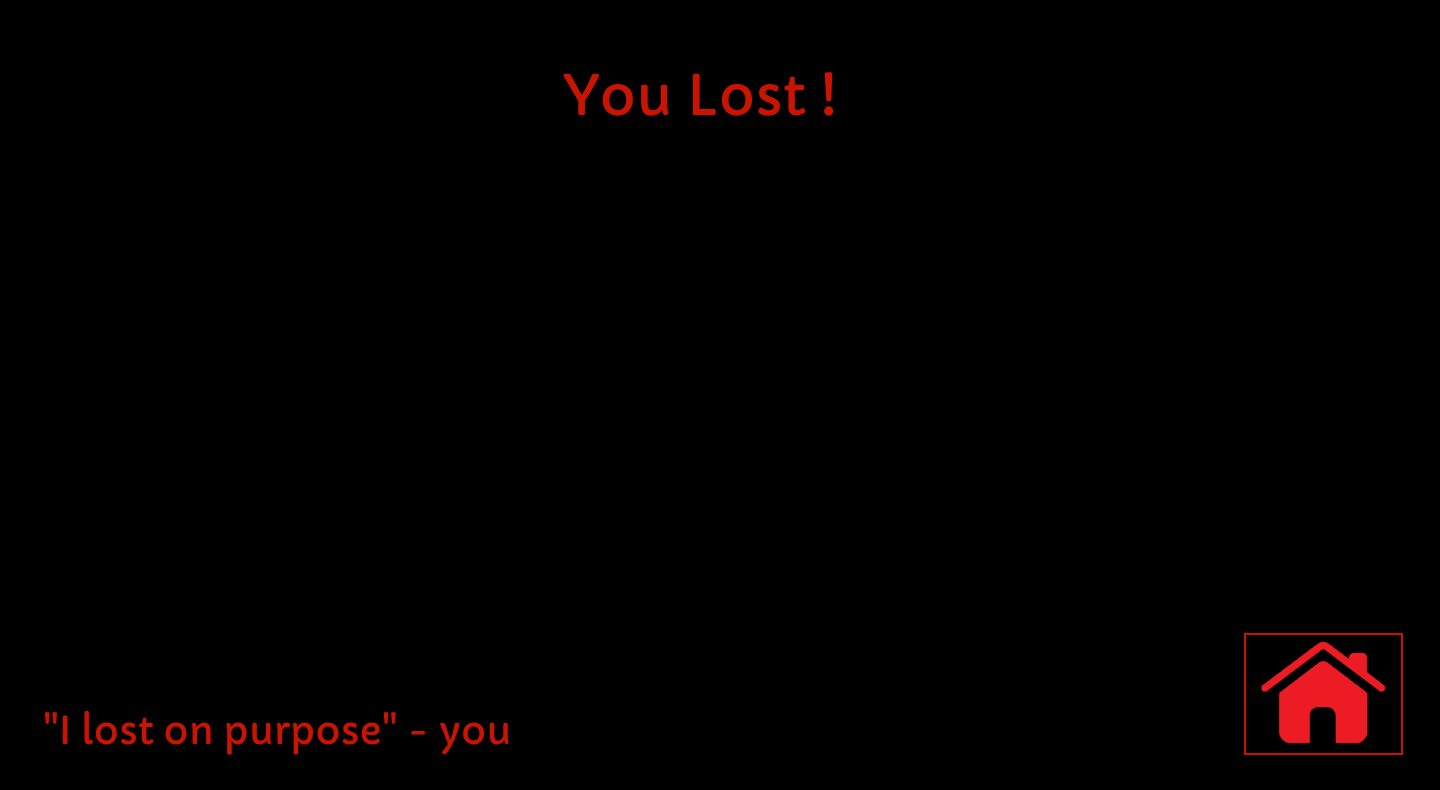
<style>
.page{position:relative;width:1440px;height:790px;background:#000000}
.page>*{position:absolute;margin:0}
.t1{font:55px "Capriola-Regular";color:#c81400}
.t2{font:38px "Capriola-Regular";color:#c81400}
</style>
<div class="page">
<p class="t1" style="left:563px;top:72px;width:271px;height:44px">You Lost !</p>
<p class="t2" style="left:44px;top:711px;width:465px;height:44px">"I lost on purpose" - you</p>
</div>
